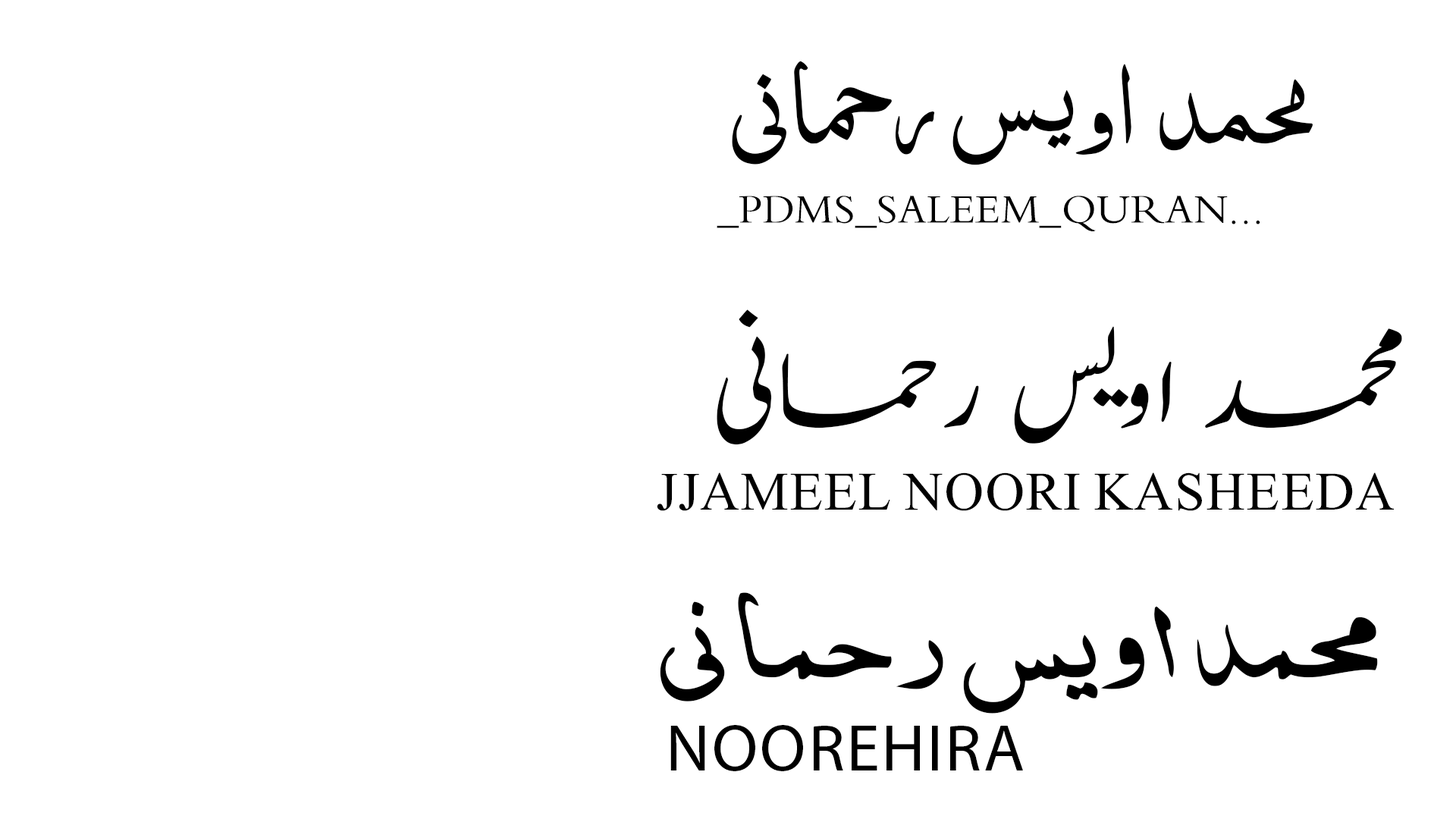
<style>
.page{position:relative;width:1456px;height:819px;background:#ffffff}
.page>*{position:absolute;margin:0}
.t1{font:123.6px "_PDMS_Saleem_QuranFont";letter-spacing:0.01em;color:#000000;text-transform:uppercase}
.t2{font:42.1px "_PDMS_Saleem_QuranFont";letter-spacing:0.01em;color:#000000;text-transform:uppercase}
.t3{font:123.6px "Jameel-Noori-Kasheeda";letter-spacing:0.01em;color:#000000;text-transform:uppercase}
.t4{font:66.1px "Jameel-Noori-Kasheeda";letter-spacing:0.01em;color:#000000;text-transform:uppercase}
.t5{font:123.6px "noorehira";letter-spacing:0.01em;color:#000000;text-transform:uppercase}
.t6{font:66.9px "MyriadPro-Regular";letter-spacing:0.01em;color:#000000;text-transform:uppercase}
</style>
<div class="page">
<p class="t1" style="left:732px;top:61px;width:581px;height:104px">محمد اویس رحمانی</p>
<p class="t2" style="left:717px;top:196px;width:543px;height:35px">_PDMS_Saleem_Quran...</p>
<p class="t3" style="left:717px;top:309px;width:685px;height:136px">محمد اویس رحمانی</p>
<p class="t4" style="left:657px;top:472px;width:737px;height:39px">JJameel Noori Kasheeda</p>
<p class="t5" style="left:660px;top:592px;width:718px;height:122px">محمد اویس رحمانی</p>
<p class="t6" style="left:670px;top:725px;width:353px;height:46px">noorehira</p>
</div>
